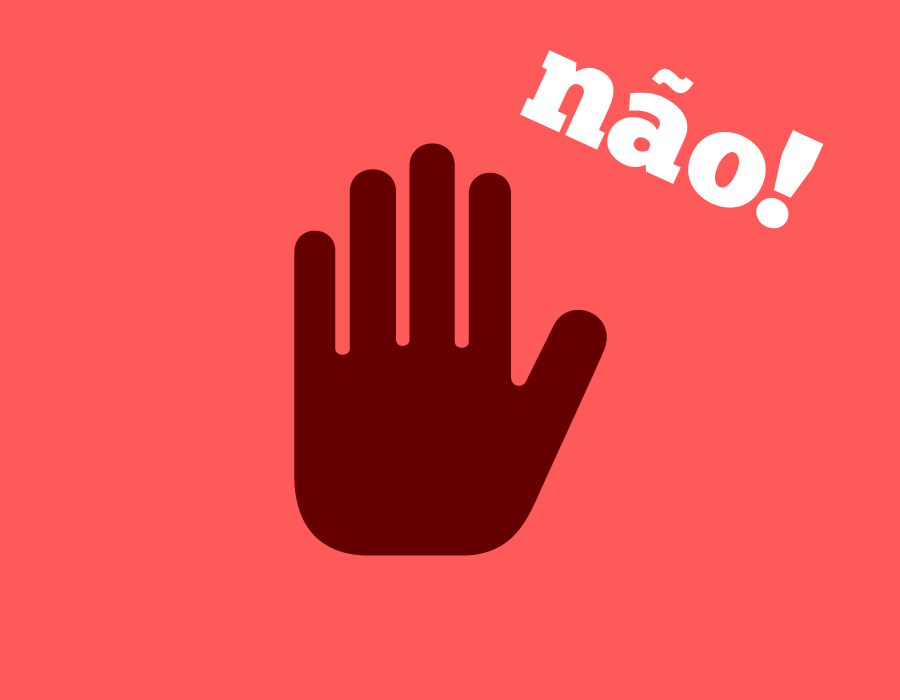
<style>
.page{position:relative;width:900px;height:700px;background:#ff5a5a}
.page>*{position:absolute;margin:0}
.t1{font:141px "ChunkFive-Roman";color:#ffffff}
.t2{font:92.7px "GothamUltra";color:#ffffff}
</style>
<div class="page">
<p class="t1" style="left:520px;top:50px;width:304px;height:179px;rotate:25deg">nao!</p>
<p class="t2" style="left:652px;top:68px;width:42px;height:26px;rotate:25deg">~</p>
</div>
